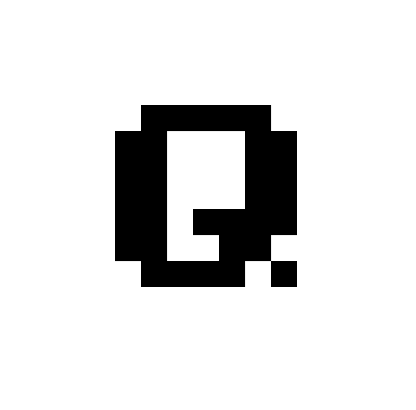
<style>
.page{position:relative;width:416px;height:410px;background:#ffffff}
.page>*{position:absolute;margin:0}
.t1{font:208.3px "PressStart2P";color:#000000}
</style>
<div class="page">
<p class="t1" style="left:115px;top:105px;width:182px;height:182px">Q</p>
</div>
